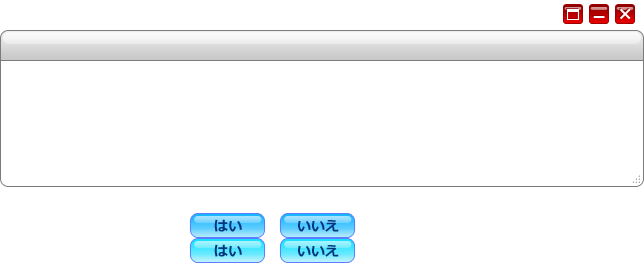
<style>
.page{position:relative;width:644px;height:263px;background:#ffffff}
.page>*{position:absolute;margin:0}
.t1{font:14px "Meiryo-Bold";letter-spacing:0.05em;color:#00357e}
.t2{font:14px "Meiryo-Bold";color:#00357e}
</style>
<div class="page">
<p class="t1" style="left:214px;top:219px;width:28px;height:13px">はい</p>
<p class="t2" style="left:298px;top:220px;width:41px;height:12px">いいえ</p>
<p class="t1" style="left:214px;top:244px;width:28px;height:13px">はい</p>
<p class="t2" style="left:298px;top:245px;width:41px;height:12px">いいえ</p>
</div>
